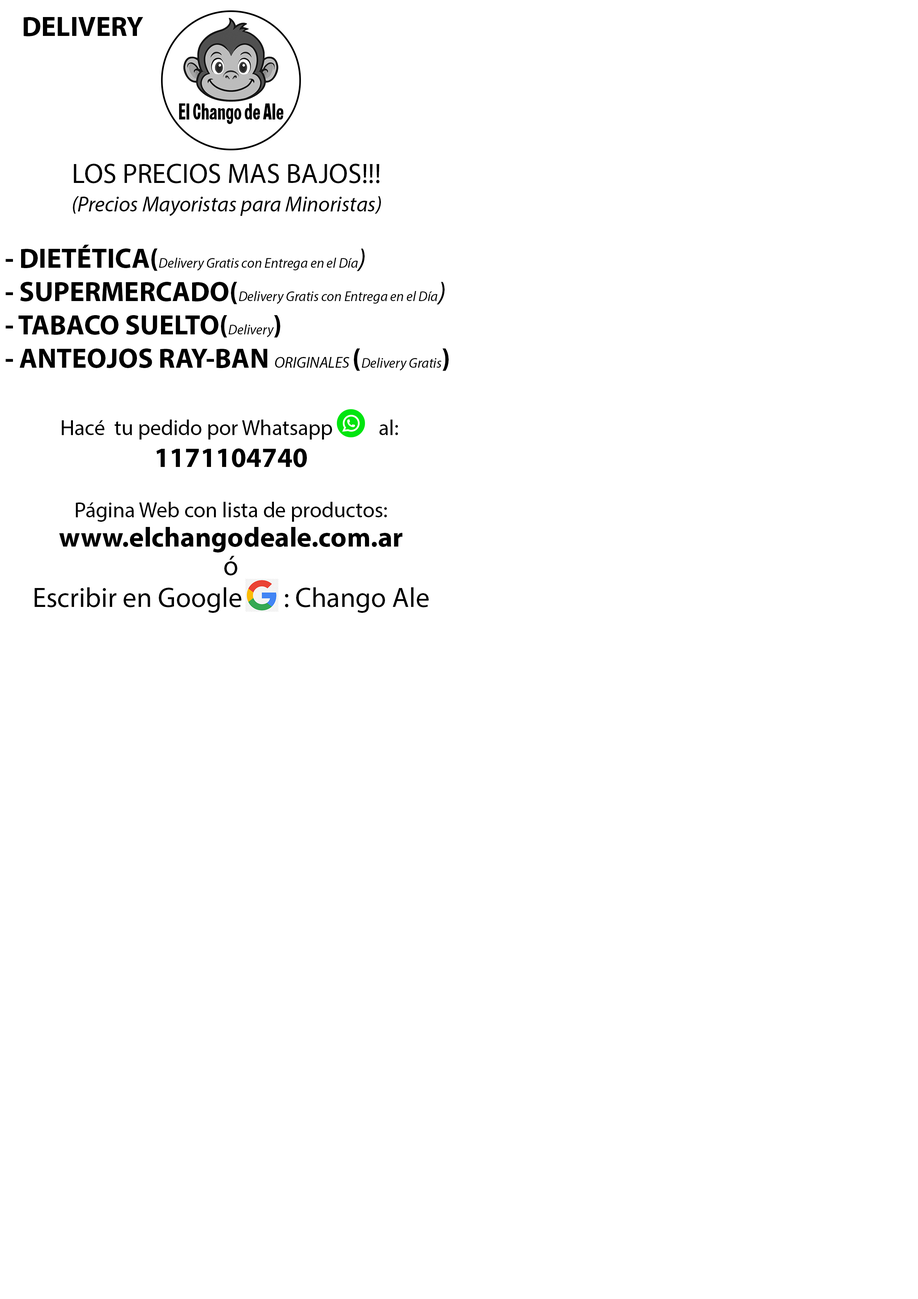
<style>
.page{position:relative;width:918px;height:1299px;background:#ffffff}
.page>*{position:absolute;margin:0}
.t1{font:27.8px "MyriadPro-Bold";color:#000000}
.t2{font:27.8px "MyriadPro-Regular";color:#000000}
.t3{font:21.6px "MyriadPro-It";color:#000000}
.t4{font:13.9px "MyriadPro-It";color:#000000}
.t5{font:27.8px "MyriadPro-It";color:#000000}
.t6{font:15.4px "MyriadPro-It";color:#000000}
.t7{font:21.6px "MyriadPro-Regular";color:#000000}
</style>
<div class="page">
<p class="t1" style="left:24px;top:17px;width:119px;height:19px">DELIVERY</p>
<p class="t2" style="left:74px;top:164px;width:305px;height:19px">LOS PRECIOS MAS BAJOS!!!</p>
<p class="t3" style="left:73px;top:196px;width:308px;height:20px">(Precios Mayoristas para Minoristas)</p>
<p class="t4" style="left:6px;top:244px;width:443px;height:127px"><span class="t1">- DIETÉTICA(</span>Delivery Gratis con Entrega en el Día<span class="t5">)<br></span><span class="t1">- SUPERMERCADO(</span>Delivery Gratis con Entrega en el Día<span class="t5">)<br></span><span class="t1">- TABACO SUELTO(</span>Delivery<span class="t1">)<br>- ANTEOJOS RAY-BAN </span><span class="t6">ORIGINALES </span><span class="t1">(</span>Delivery Gratis<span class="t1">)</span></p>
<p class="t7" style="left:62px;top:419px;width:336px;height:20px">Hacé  tu pedido por Whatsapp          al:</p>
<p class="t1" style="left:156px;top:448px;width:151px;height:19px">1171104740</p>
<p class="t7" style="left:76px;top:502px;width:311px;height:20px">Página Web con lista de productos:</p>
<p class="t1" style="left:59px;top:527px;width:343px;height:25px">www.elchangodeale.com.ar</p>
<p class="t2" style="left:224px;top:556px;width:13px;height:19px">ó</p>
<p class="t2" style="left:34px;top:587px;width:395px;height:26px">Escribir en Google       : Chango Ale</p>
</div>
